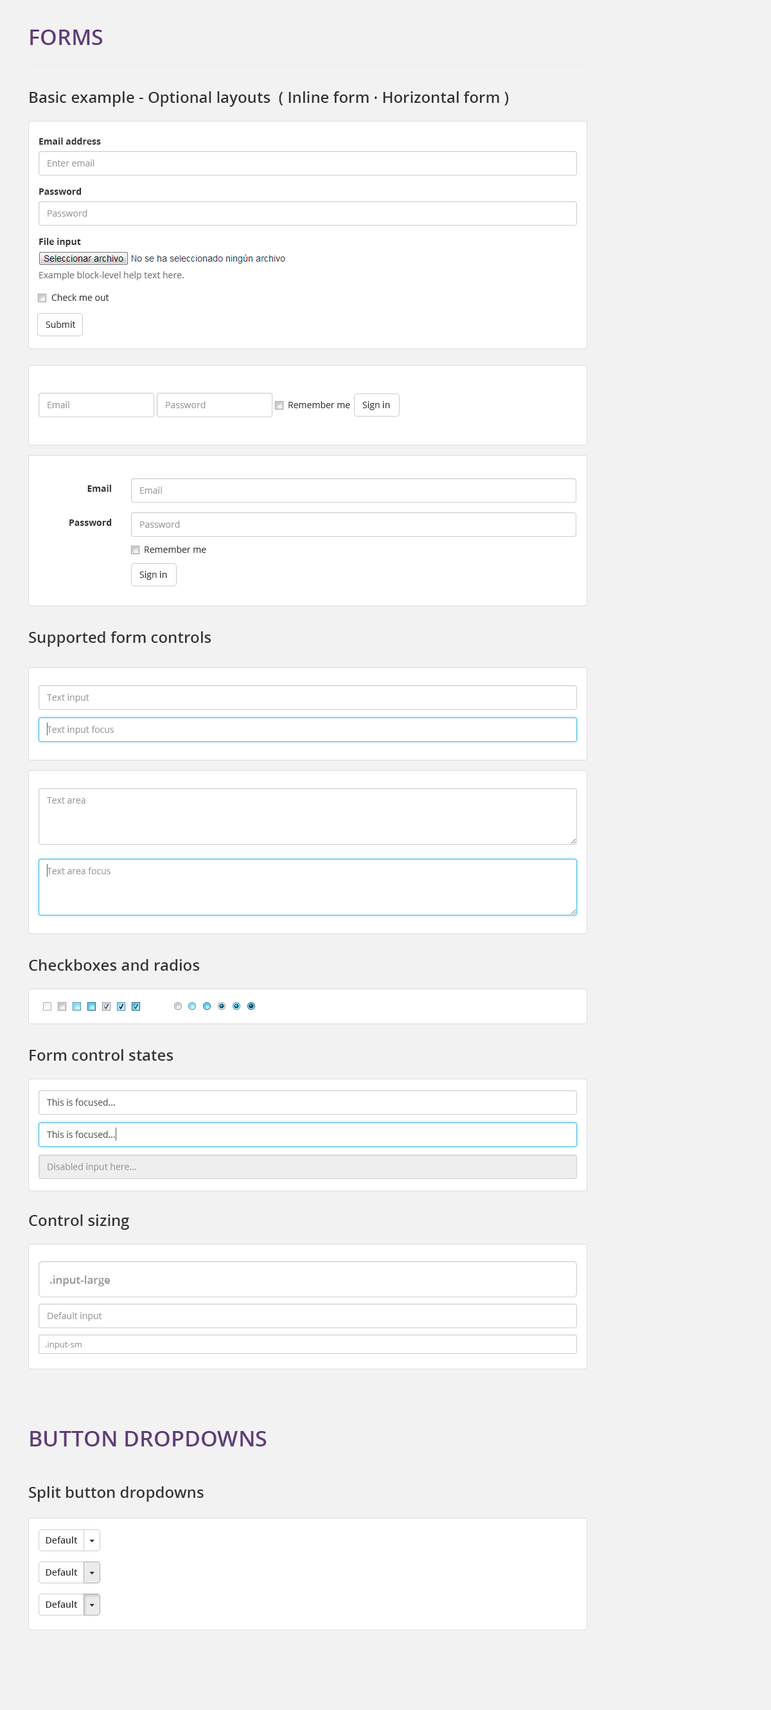
<style>
.page{position:relative;width:771px;height:1710px;background:#f2f2f2}
.page>*{position:absolute;margin:0}
.t1{font:21.9px "OpenSans-Semibold";color:#613c78;text-transform:uppercase}
.t2{font:15.4px "OpenSans-Semibold";color:#333333}
.t3{font:9px "OpenSans-Bold";color:#333333}
.t4{font:9px "OpenSans";color:#999999}
.t5{font:9px "OpenSans";color:#737373}
.t6{font:9px "OpenSans";color:#333333}
.t7{font:9px "OpenSans";color:#555555}
.t8{font:10.9px "OpenSans-Semibold";color:#999999}
.t9{font:8.4px "OpenSans";color:#999999}
.t10{font:9px "OpenSans-Semibold";color:#333333}
</style>
<div class="page">
<p class="t1" style="left:30px;top:30px;width:73px;height:15px">Forms</p>
<p class="t2" style="left:30px;top:91px;width:479px;height:16px">Basic example - Optional layouts  ( Inline form · Horizontal form )</p>
<p class="t3" style="left:39px;top:138px;width:62px;height:7px">Email address</p>
<p class="t4" style="left:48px;top:159px;width:46px;height:7px">Enter email</p>
<p class="t3" style="left:39px;top:188px;width:43px;height:7px">Password</p>
<p class="t4" style="left:48px;top:210px;width:39px;height:7px">Password</p>
<p class="t3" style="left:39px;top:238px;width:42px;height:9px">File input</p>
<p class="t5" style="left:39px;top:271px;width:145px;height:9px">Example block-level help text here.</p>
<p class="t6" style="left:51px;top:294px;width:58px;height:7px">Check me out</p>
<p class="t6" style="left:46px;top:321px;width:30px;height:7px">Submit</p>
<p class="t4" style="left:48px;top:401px;width:21px;height:7px">Email</p>
<p class="t4" style="left:166px;top:401px;width:40px;height:7px">Password</p>
<p class="t6" style="left:289px;top:401px;width:61px;height:7px">Remember me</p>
<p class="t6" style="left:363px;top:401px;width:27px;height:9px">Sign in</p>
<p class="t3" style="left:87px;top:485px;width:24px;height:7px">Email</p>
<p class="t4" style="left:140px;top:487px;width:22px;height:7px">Email</p>
<p class="t3" style="left:69px;top:519px;width:43px;height:7px">Password</p>
<p class="t4" style="left:140px;top:521px;width:40px;height:7px">Password</p>
<p class="t6" style="left:145px;top:546px;width:61px;height:7px">Remember me</p>
<p class="t6" style="left:140px;top:571px;width:27px;height:9px">Sign in</p>
<p class="t2" style="left:29px;top:631px;width:183px;height:16px">Supported form controls</p>
<p class="t4" style="left:47px;top:694px;width:42px;height:9px">Text input</p>
<p class="t4" style="left:47px;top:726px;width:67px;height:9px">Text input focus</p>
<p class="t4" style="left:47px;top:797px;width:39px;height:7px">Text area</p>
<p class="t4" style="left:47px;top:867px;width:64px;height:7px">Text area focus</p>
<p class="t2" style="left:29px;top:959px;width:171px;height:12px">Checkboxes and radios</p>
<p class="t2" style="left:30px;top:1049px;width:144px;height:12px">Form control states</p>
<p class="t7" style="left:47px;top:1099px;width:68px;height:7px">This is focused...</p>
<p class="t7" style="left:47px;top:1131px;width:68px;height:7px">This is focused...</p>
<p class="t4" style="left:48px;top:1163px;width:88px;height:9px">Disabled input here...</p>
<p class="t2" style="left:29px;top:1214px;width:100px;height:16px">Control sizing</p>
<p class="t8" style="left:50px;top:1275px;width:61px;height:11px">.input-large</p>
<p class="t4" style="left:48px;top:1312px;width:54px;height:9px">Default input</p>
<p class="t9" style="left:45px;top:1342px;width:37px;height:7px">.input-sm</p>
<p class="t1" style="left:30px;top:1431px;width:237px;height:15px">Button dropdowns</p>
<p class="t2" style="left:29px;top:1486px;width:175px;height:16px">Split button dropdowns</p>
<p class="t10" style="left:46px;top:1536px;width:32px;height:8px">Default</p>
<p class="t10" style="left:46px;top:1569px;width:32px;height:7px">Default</p>
<p class="t10" style="left:46px;top:1601px;width:32px;height:7px">Default</p>
</div>
